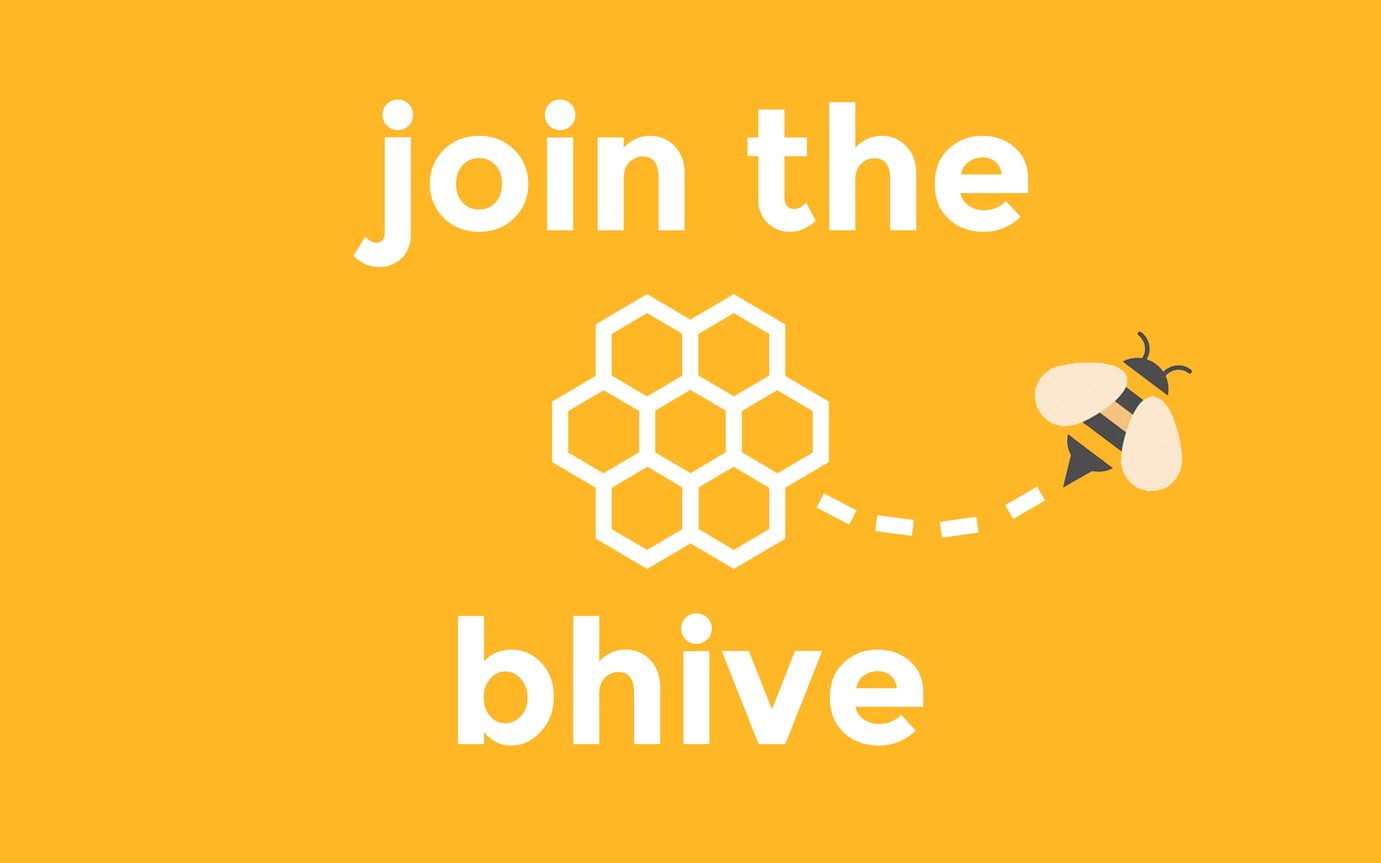
<style>
.page{position:relative;width:1381px;height:863px;background:#ffb726}
.page>*{position:absolute;margin:0}
.t1{font:172.7px "Montserrat-Bold";color:#ffffff}
</style>
<div class="page">
<p class="t1" style="left:353px;top:99px;width:676px;height:168px">join the</p>
<p class="t1" style="left:458px;top:613px;width:466px;height:133px">bhive</p>
</div>
